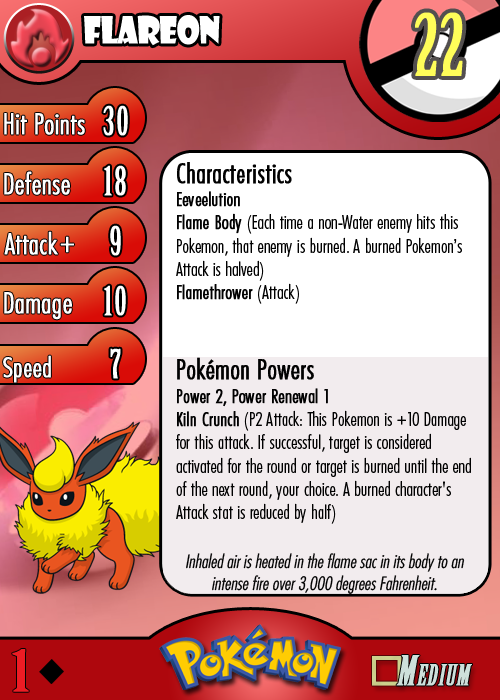
<style>
.page{position:relative;width:500px;height:700px}
.page>*{position:absolute;margin:0}
.t1{font:36.7px "ShowcardGothic-Reg";letter-spacing:-0.025em;color:#ffffff;scale:0.91 1}
.t2{font:83.3px "BirchStd";letter-spacing:0.025em;color:#fffd59;font-weight:bold}
.t3{font:27.8px "Futura-CondensedLight";color:#ffffff;font-weight:bold}
.t4{font:38.9px "BirchStd";letter-spacing:0.035em;color:#ffffff;font-weight:bold}
.t5{font:19.4px "FuturaCondensedBQ-Light";color:#010101}
.t6{font:27.8px "FuturaCondensedBQ-Light";color:#010101;font-weight:bold}
.t7{font:19.4px "FuturaCondensedBQ-Light";color:#010101;font-weight:bold}
.t8{font:30.6px "Futura-CondensedLight";color:#ffffff;font-weight:bold}
.t9{font:27.8px "FuturaCondensedBQ-Light";color:#ffffff;font-weight:bold}
.t10{font:18.1px "Futura-CondensedLight";color:#010101;font-style:italic}
.t11{font:55.6px "BirchStd";color:#ed1c24;font-weight:bold;scale:1.5 1}
</style>
<div class="page">
<p class="t1" style="left:84px;top:15px;width:136px;height:31px">flareon</p>
<p class="t2" style="left:415px;top:12px;width:48px;height:64px">22</p>
<p class="t3" style="left:4px;top:113px;width:81px;height:22px">Hit Points</p>
<p class="t4" style="left:103px;top:105px;width:25px;height:31px">30</p>
<p class="t3" style="left:4px;top:171px;width:66px;height:24px">Defense</p>
<p class="t4" style="left:104px;top:165px;width:22px;height:31px">18</p>
<p class="t5" style="left:176px;top:162px;width:295px;height:362px"><span class="t6">Characteristics<br></span><span class="t7">Eeveelution<br>Flame Body </span>(Each time a non-Water enemy hits this Pokemon, that enemy is burned. A burned Pokemon’s Attack is halved)<br><span class="t7">Flamethrower</span> (Attack)<br><br><br><span class="t6">Pokémon Powers<br></span><span class="t7">Power 2, Power Renewal 1<br>Kiln Crunch</span> (P2 Attack: This Pokemon is +10 Damage for this attack. If successful, target is considered activated for the round or target is burned until the end of the next round, your choice. A burned character's Attack stat is reduced by half)</p>
<p class="t3" style="left:4px;top:231px;width:54px;height:24px">Attack</p>
<p class="t4" style="left:110px;top:225px;width:11px;height:31px">9</p>
<p class="t8" style="left:60px;top:236px;width:14px;height:17px">+</p>
<p class="t3" style="left:4px;top:292px;width:68px;height:28px">Damage</p>
<p class="t4" style="left:104px;top:285px;width:22px;height:31px">10</p>
<p class="t4" style="left:110px;top:348px;width:11px;height:31px">7</p>
<p class="t9" style="left:3px;top:355px;width:48px;height:28px">Speed</p>
<p class="t10" style="left:186px;top:553px;width:279px;height:41px;text-align:center">Inhaled air is heated in the flame sac in its body to an intense fire over 3,000 degrees Fahrenheit.</p>
<p class="t11" style="left:12px;top:649px;width:17px;height:43px">1</p>
</div>
